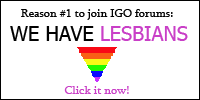
<style>
.page{position:relative;width:200px;height:100px;background:#ffffff}
.page>*{position:absolute;margin:0}
.t1{font:12px "Sylfaen";color:#010101}
.t2{font:20px "Tahoma";color:#c93fc7}
.t3{font:20px "Tahoma";color:#010101}
.t4{font:12px "Sylfaen";color:#c93fc7}
</style>
<div class="page">
<p class="t1" style="left:21px;top:9px;width:152px;height:11px">Reason #1 to join IGO forums:</p>
<p class="t2" style="left:10px;top:26px;width:178px;height:15px"><span class="t3">WE HAVE </span>LESBIANS</p>
<p class="t4" style="left:64px;top:86px;width:65px;height:8px">Click it now!</p>
</div>
